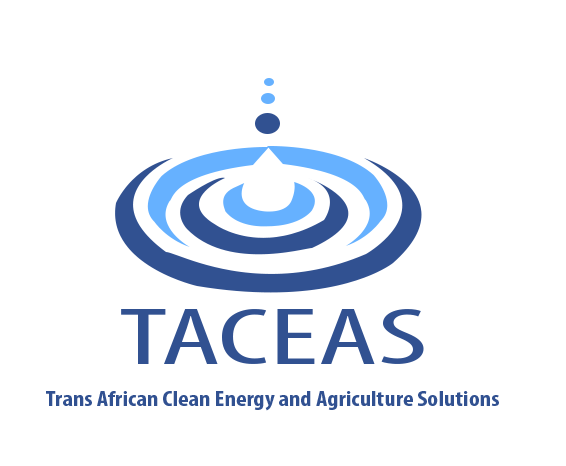
<style>
.page{position:relative;width:566px;height:466px;background:#ffffff}
.page>*{position:absolute;margin:0}
.t1{font:82.2px "MyriadPro-Cond";color:#315191;scale:1.67 1}
.t2{font:21.7px "MyriadPro-BoldCond";color:#315191;scale:1.15 1}
</style>
<div class="page">
<p class="t1" style="left:121px;top:309px;width:303px;height:55px">TACEAS</p>
<p class="t2" style="left:46px;top:391px;width:453px;height:20px">Trans African Clean Energy and Agriculture Solutions</p>
</div>
